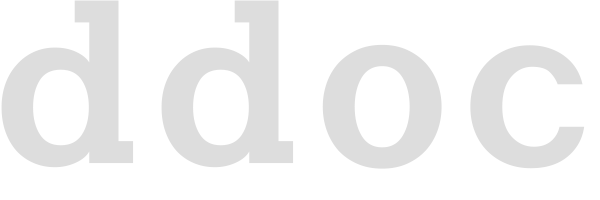
<style>
.page{position:relative;width:600px;height:200px;background:#ffffff}
.page>*{position:absolute;margin:0}
.t1{font:208.3px "HaanSomangB";color:#dddddd}
</style>
<div class="page">
<p class="t1" style="left:1px;top:0px;width:584px;height:169px">ddoc</p>
</div>
